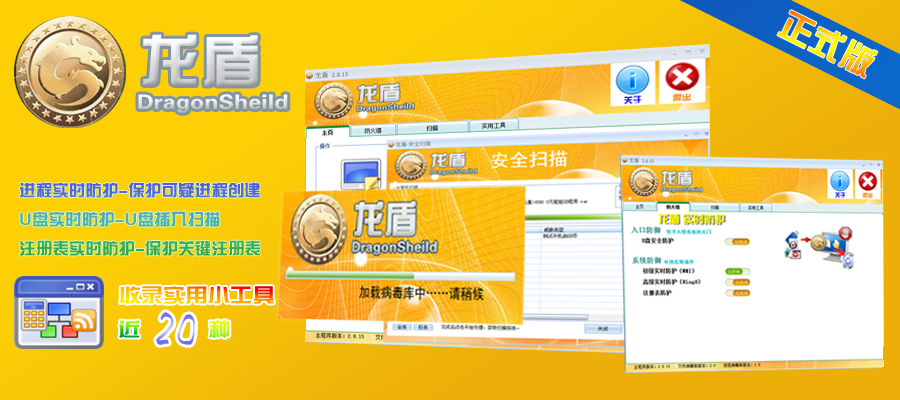
<style>
.page{position:relative;width:900px;height:400px}
.page>*{position:absolute;margin:0}
.t1{font:33.3px "FZZYJW--GB1-0"}
.t2{font:57.2px "FZZYJW--GB1-0";scale:1.06 1}
.t3{font:20px "FZZYJW--GB1-0";scale:1.17 1}
.t4{font:16.3px "FZZYJW--GB1-0"}
.t5{font:49.3px "Ò¶¸ùÓÑÐÐÊé·±";scale:0.84 1}
</style>
<div class="page">
<p class="t1" style="left:777px;top:10px;width:101px;height:69px;rotate:26deg">正式版</p>
<p class="t2" style="left:143px;top:34px;width:115px;height:52px">龙盾</p>
<p class="t3" style="left:138px;top:94px;width:150px;height:19px">DragonSheild</p>
<p class="t4" style="left:20px;top:182px;width:240px;height:74px">进程实时防护-保护可疑进程创建<br>U盘实时防护-U盘插入扫描<br>注册表实时防护-保护关键注册表</p>
<p class="t5" style="left:156px;top:312px;width:39px;height:33px">20</p>
</div>
